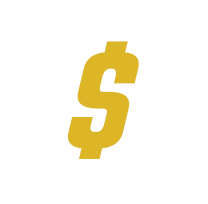
<style>
.page{position:relative;width:208px;height:204px;background:#ffffff}
.page>*{position:absolute;margin:0}
.t1{font:172px "Overseer-Italic";color:#dcb626;scale:0.9 1}
</style>
<div class="page">
<p class="t1" style="left:67px;top:41px;width:72px;height:118px">$</p>
</div>
